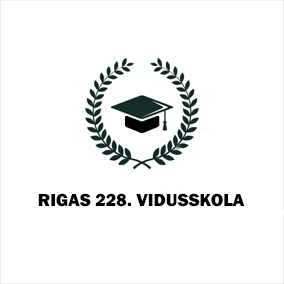
<style>
.page{position:relative;width:284px;height:284px;background:#ffffff}
.page>*{position:absolute;margin:0}
.t1{font:18px "FranklinGothic-Heavy";color:#000000;text-transform:uppercase}
</style>
<div class="page">
<p class="t1" style="left:38px;top:193px;width:207px;height:14px">RIGAS 228. VIDUSSKOLA</p>
</div>
